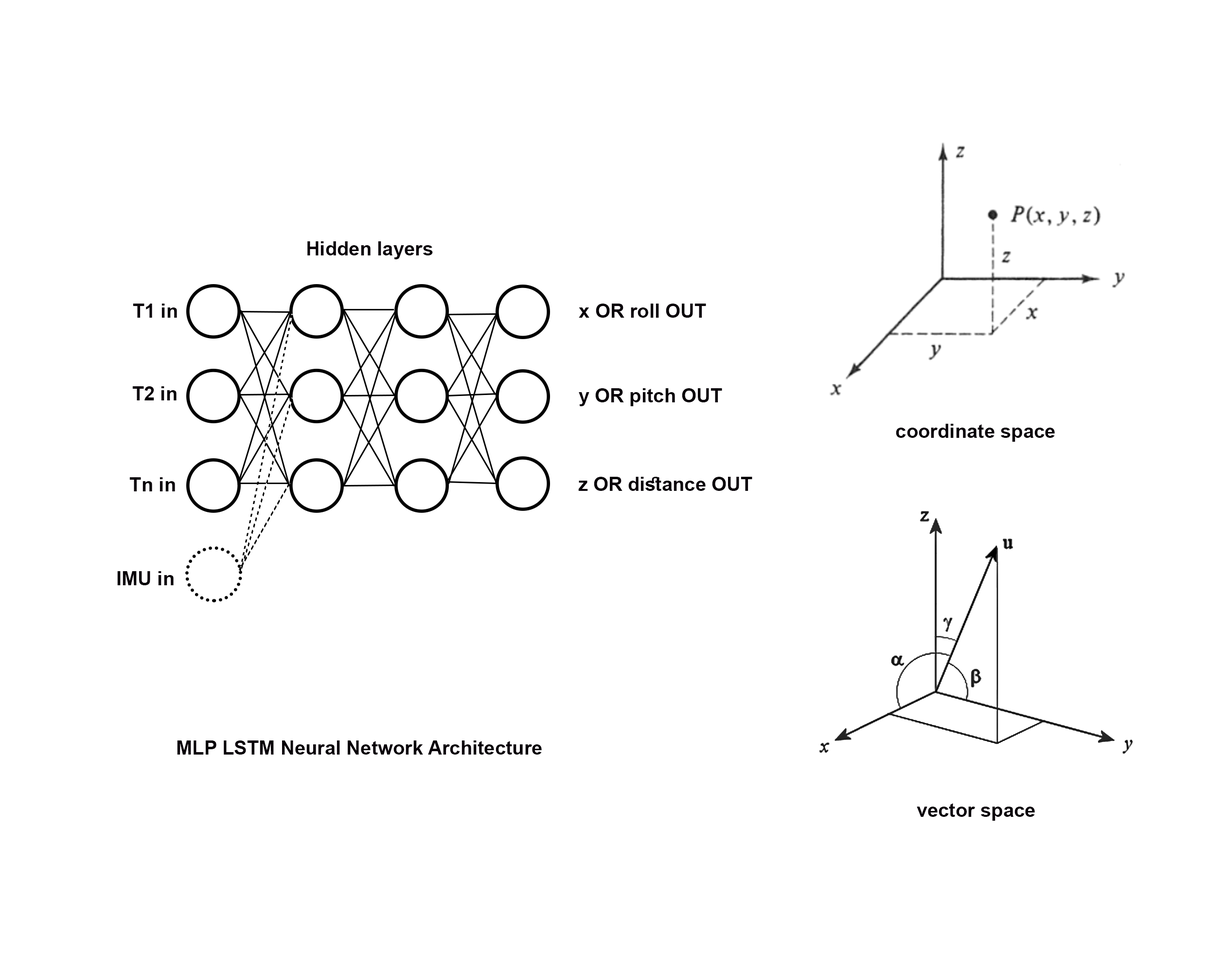
<style>
.page{position:relative;width:1226px;height:973px;background:#ffffff}
.page>*{position:absolute;margin:0}
.t1{font:19.5px "Arial-BoldMT";color:#070007}
</style>
<div class="page">
<p class="t1" style="left:307px;top:241px;width:126px;height:18px">Hidden layers</p>
<p class="t1" style="left:133px;top:303px;width:44px;height:15px">T1 in</p>
<p class="t1" style="left:579px;top:303px;width:127px;height:15px">x OR roll OUT</p>
<p class="t1" style="left:132px;top:386px;width:45px;height:14px">T2 in</p>
<p class="t1" style="left:579px;top:388px;width:143px;height:18px">y OR pitch OUT</p>
<p class="t1" style="left:896px;top:424px;width:159px;height:18px">coordinate space</p>
<p class="t1" style="left:129px;top:477px;width:46px;height:14px">Tn in</p>
<p class="t1" style="left:578px;top:477px;width:174px;height:14px">z OR distance OUT</p>
<p class="t1" style="left:117px;top:571px;width:57px;height:14px">IMU in</p>
<p class="t1" style="left:177px;top:740px;width:365px;height:14px">MLP LSTM Neural Network Architecture</p>
<p class="t1" style="left:917px;top:803px;width:118px;height:17px">vector space</p>
</div>
